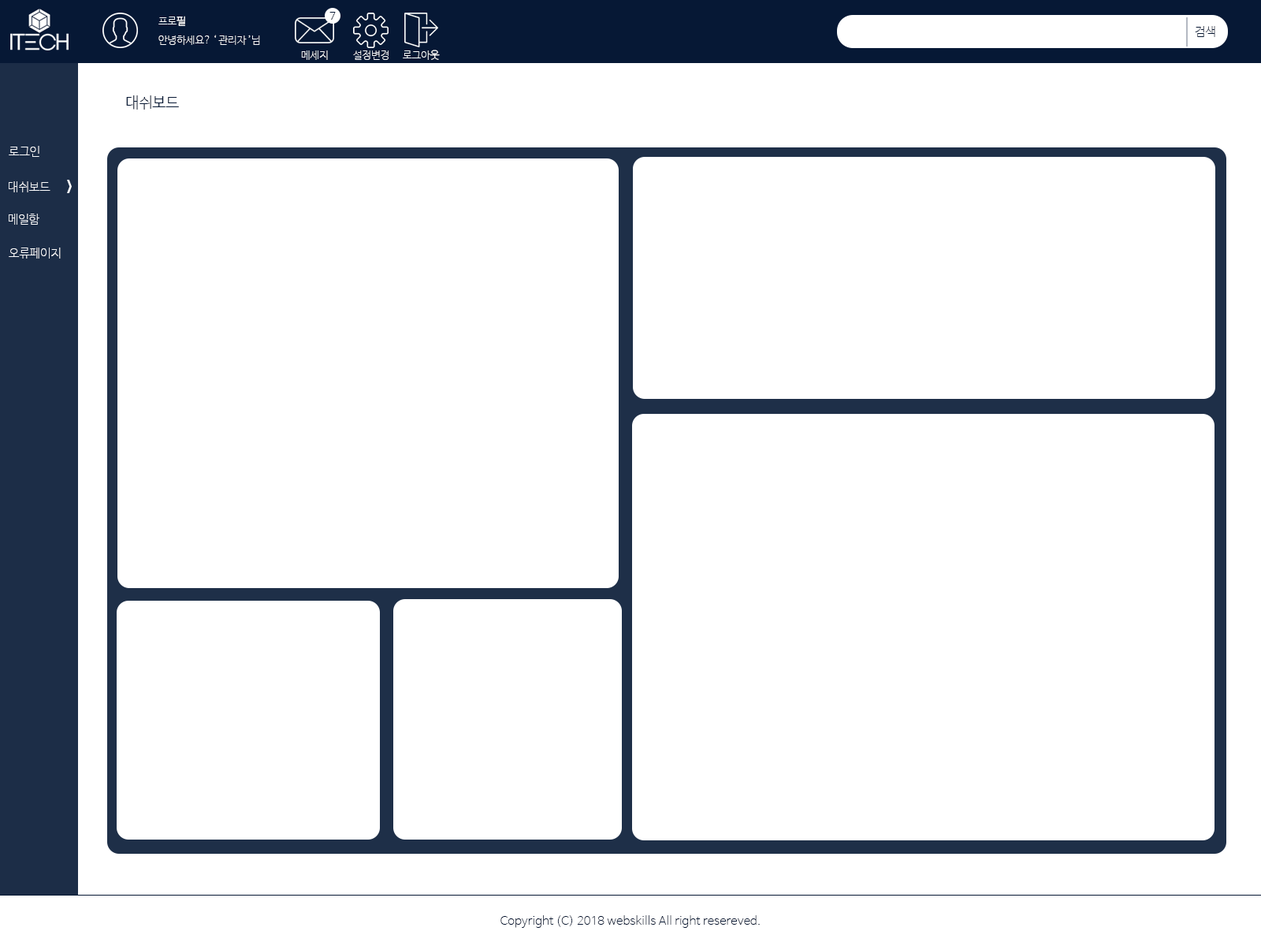
<style>
.page{position:relative;width:1261px;height:946px;background:#ffffff}
.page>*{position:absolute;margin:0}
.t1{font:10.2px "NanumBarunGothicUltraLight";color:#ffffff;text-transform:uppercase}
.t2{font:11px "NanumBarunGothicLight";color:#061834;text-transform:uppercase}
.t3{font:11.8px "NanumBarunGothicUltraLight";color:#061834;text-transform:uppercase}
.t4{font:15px "NanumBarunGothicLight";color:#061834;text-transform:uppercase}
.t5{font:11.8px "NanumBarunGothicUltraLight";color:#fefeff;text-transform:uppercase}
.t6{font:11.8px "NanumBarunGothicUltraLight";color:#061834}
</style>
<div class="page">
<p class="t1" style="left:158px;top:16px;width:27px;height:10px">프로필</p>
<p class="t2" style="left:329px;top:12px;width:7px;height:8px">7</p>
<p class="t3" style="left:1195px;top:26px;width:20px;height:11px">검색</p>
<p class="t1" style="left:158px;top:35px;width:102px;height:10px">안녕하세요? ‘ 관리자 ’님</p>
<p class="t1" style="left:301px;top:50px;width:27px;height:10px">메세지</p>
<p class="t1" style="left:353px;top:50px;width:36px;height:10px">설정변경</p>
<p class="t1" style="left:403px;top:50px;width:37px;height:10px">로그아웃</p>
<p class="t4" style="left:126px;top:95px;width:53px;height:15px">대쉬보드</p>
<p class="t5" style="left:9px;top:146px;width:30px;height:11px">로그인</p>
<p class="t5" style="left:9px;top:181px;width:41px;height:11px">대쉬보드</p>
<p class="t5" style="left:9px;top:214px;width:30px;height:11px">메일함</p>
<p class="t5" style="left:9px;top:247px;width:52px;height:11px">오류페이지</p>
<p class="t6" style="left:500px;top:915px;width:260px;height:13px">Copyright (C) 2018 webskills All right resereved.</p>
</div>
